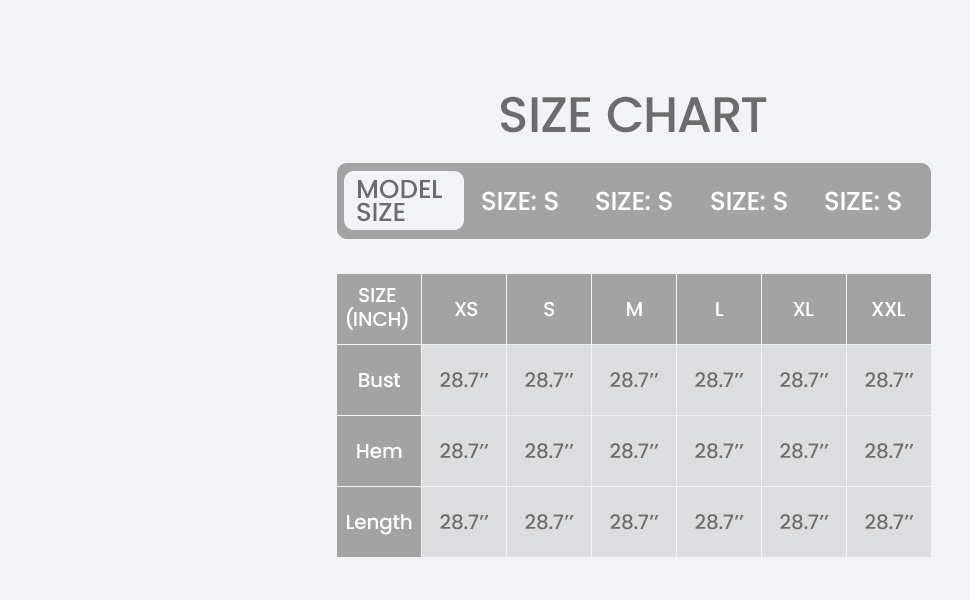
<style>
.page{position:relative;width:970px;height:600px;background:#f2f3f6}
.page>*{position:absolute;margin:0}
.t1{font:50px "Poppins-Medium";color:#6c6c6c;text-transform:uppercase}
.t2{font:26px "Poppins-Medium";color:#6c6c6c;text-transform:uppercase}
.t3{font:26px "Poppins-Medium";color:#ffffff;text-transform:uppercase}
.t4{font:20px "Poppins-Medium";color:#ffffff;text-transform:uppercase}
.t5{font:20px "Poppins-Medium";color:#ffffff}
.t6{font:20px "Poppins-Medium";color:#6c6c6c;text-transform:uppercase}
</style>
<div class="page">
<p class="t1" style="left:501px;top:96px;width:266px;height:37px">SIZE CHART</p>
<p class="t2" style="left:357px;top:179px;width:85px;height:43px">MODEL<br>SIZE</p>
<p class="t3" style="left:482px;top:191px;width:76px;height:20px">size: s</p>
<p class="t3" style="left:596px;top:191px;width:76px;height:20px">size: s</p>
<p class="t3" style="left:711px;top:191px;width:76px;height:20px">size: s</p>
<p class="t3" style="left:825px;top:191px;width:76px;height:20px">size: s</p>
<p class="t4" style="left:347px;top:288px;width:61px;height:42px;text-align:center">size<br>(INCH)</p>
<p class="t4" style="left:455px;top:302px;width:23px;height:15px">XS</p>
<p class="t4" style="left:544px;top:302px;width:11px;height:15px">S</p>
<p class="t4" style="left:627px;top:302px;width:15px;height:14px">M</p>
<p class="t4" style="left:716px;top:302px;width:8px;height:14px">L</p>
<p class="t4" style="left:793px;top:302px;width:21px;height:14px">XL</p>
<p class="t4" style="left:872px;top:302px;width:33px;height:14px">XXL</p>
<p class="t5" style="left:359px;top:373px;width:41px;height:15px">Bust</p>
<p class="t6" style="left:440px;top:372px;width:49px;height:16px">28.7’’</p>
<p class="t6" style="left:525px;top:372px;width:49px;height:16px">28.7’’</p>
<p class="t6" style="left:610px;top:372px;width:49px;height:16px">28.7’’</p>
<p class="t6" style="left:695px;top:372px;width:49px;height:16px">28.7’’</p>
<p class="t6" style="left:780px;top:372px;width:49px;height:16px">28.7’’</p>
<p class="t6" style="left:865px;top:372px;width:49px;height:16px">28.7’’</p>
<p class="t5" style="left:357px;top:444px;width:45px;height:15px">Hem</p>
<p class="t6" style="left:440px;top:443px;width:49px;height:16px">28.7’’</p>
<p class="t6" style="left:525px;top:443px;width:49px;height:16px">28.7’’</p>
<p class="t6" style="left:610px;top:443px;width:49px;height:16px">28.7’’</p>
<p class="t6" style="left:695px;top:443px;width:49px;height:16px">28.7’’</p>
<p class="t6" style="left:780px;top:443px;width:49px;height:16px">28.7’’</p>
<p class="t6" style="left:865px;top:443px;width:49px;height:16px">28.7’’</p>
<p class="t5" style="left:347px;top:514px;width:65px;height:21px">Length</p>
<p class="t6" style="left:440px;top:514px;width:49px;height:16px">28.7’’</p>
<p class="t6" style="left:525px;top:514px;width:49px;height:16px">28.7’’</p>
<p class="t6" style="left:610px;top:514px;width:49px;height:16px">28.7’’</p>
<p class="t6" style="left:695px;top:514px;width:49px;height:16px">28.7’’</p>
<p class="t6" style="left:780px;top:514px;width:49px;height:16px">28.7’’</p>
<p class="t6" style="left:865px;top:514px;width:49px;height:16px">28.7’’</p>
</div>
